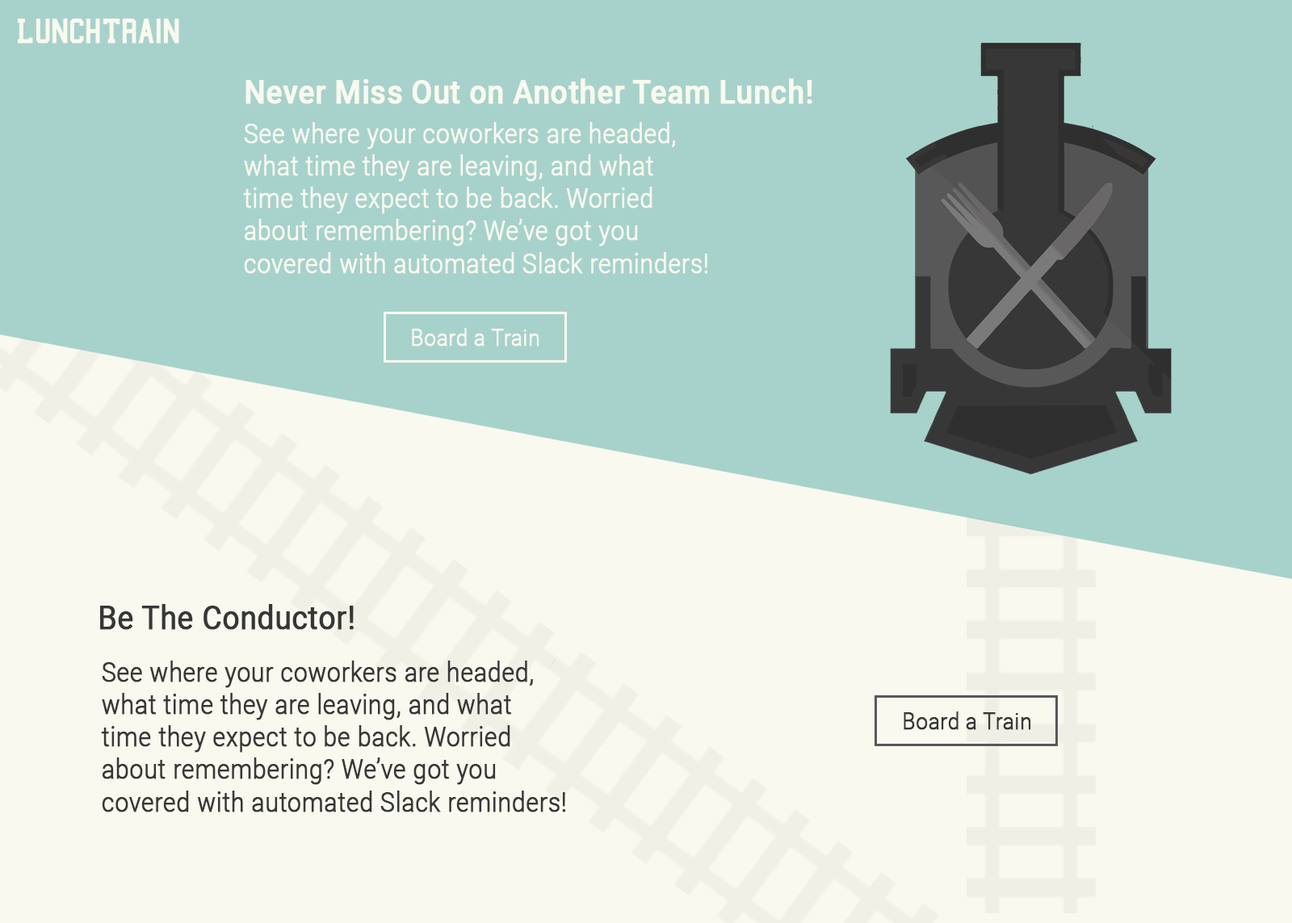
<style>
.page{position:relative;width:1292px;height:923px;background:#f9f9ef}
.page>*{position:absolute;margin:0}
.t1{font:35.3px "College";color:#f9f9ef;font-weight:bold;scale:0.9 1}
.t2{font:33.3px "Roboto-Medium";color:#f9f9ef;font-weight:bold;scale:0.9 1}
.t3{font:27.1px "Roboto-Light";color:#f9f9ef;font-weight:bold;scale:0.9 1}
.t4{font:23.6px "Roboto-Light";color:#f9f9ef;font-weight:bold;scale:0.9 1}
.t5{font:33.1px "Roboto-Regular";color:#383737;font-weight:bold;scale:0.9 1}
.t6{font:27.1px "Roboto-Light";color:#383737;font-weight:bold;scale:0.9 1}
.t7{font:23.6px "Roboto-Light";color:#383737;font-weight:bold;scale:0.9 1}
</style>
<div class="page">
<p class="t1" style="left:17px;top:19px;width:162px;height:25px">LunchTrain</p>
<p class="t2" style="left:245px;top:78px;width:567px;height:26px">Never Miss Out on Another Team Lunch!</p>
<p class="t3" style="left:243px;top:122px;width:464px;height:152px">See where your coworkers are headed,<br>what time they are leaving, and what<br>time they expect to be back. Worried<br>about remembering? We’ve got you<br>covered with automated Slack reminders!</p>
<p class="t4" style="left:412px;top:328px;width:127px;height:18px">Board a Train</p>
<p class="t5" style="left:100px;top:604px;width:254px;height:26px">Be The Conductor!</p>
<p class="t6" style="left:101px;top:661px;width:464px;height:151px">See where your coworkers are headed,<br>what time they are leaving, and what<br>time they expect to be back. Worried<br>about remembering? We’ve got you<br>covered with automated Slack reminders!</p>
<p class="t7" style="left:904px;top:711px;width:127px;height:19px">Board a Train</p>
</div>
